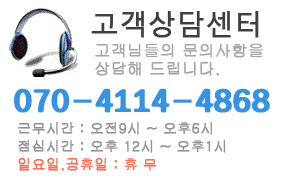
<style>
.page{position:relative;width:300px;height:180px;background:#ffffff}
.page>*{position:absolute;margin:0}
.t1{font:28px "MalgunGothicRegular";color:#443d3d;font-weight:bold}
.t2{font:16px/18px "Gulim";color:#a7a6ae;font-weight:bold}
.t3{font:30px "HYdnkB";letter-spacing:-0.025em;color:#3792e1;font-weight:bold}
.t4{font:14px/18px "Gulim";color:#959595;font-weight:bold}
.t5{font:14px/18px "Gulim";color:#fb6f54;font-weight:bold}
</style>
<div class="page">
<p class="t1" style="left:91px;top:11px;width:168px;height:27px">고객상담센터</p>
<p class="t2" style="left:95px;top:43px;width:168px;height:33px">고객님들의 문의사항을 <br>상담해 드립니다.</p>
<p class="t3" style="left:14px;top:88px;width:256px;height:25px">070-4114-4868</p>
<p class="t4" style="left:18px;top:122px;width:208px;height:49px">근무시간 : 오전9시 ~ 오후6시<br>점심시간 : 오후 12시 ~ 오후1시<br><span class="t5">일요일.공휴일 : 휴 무</span></p>
</div>
